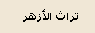
<style>
.page{position:relative;width:95px;height:33px;background:#f0e7d6}
.page>*{position:absolute;margin:0}
.t1{font:11px "Tahoma-Bold";color:#000000}
</style>
<div class="page">
<p class="t1" style="left:23px;top:9px;width:55px;height:13px">تراث الأزهر</p>
</div>
